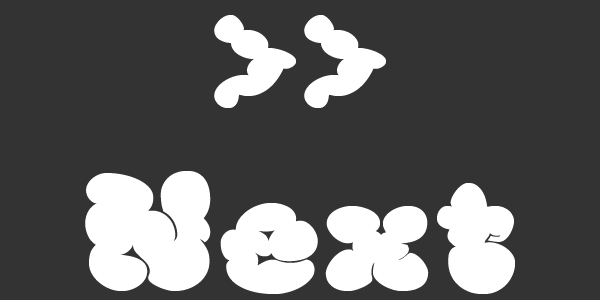
<style>
.page{position:relative;width:600px;height:300px;background:#333333}
.page>*{position:absolute;margin:0}
.t1{font:150px "McKloudBlack";letter-spacing:0.01em;color:#ffffff;scale:1.2 1}
</style>
<div class="page">
<p class="t1" style="left:85px;top:15px;width:430px;height:279px;text-align:center">&gt;&gt;<br>Next</p>
</div>
